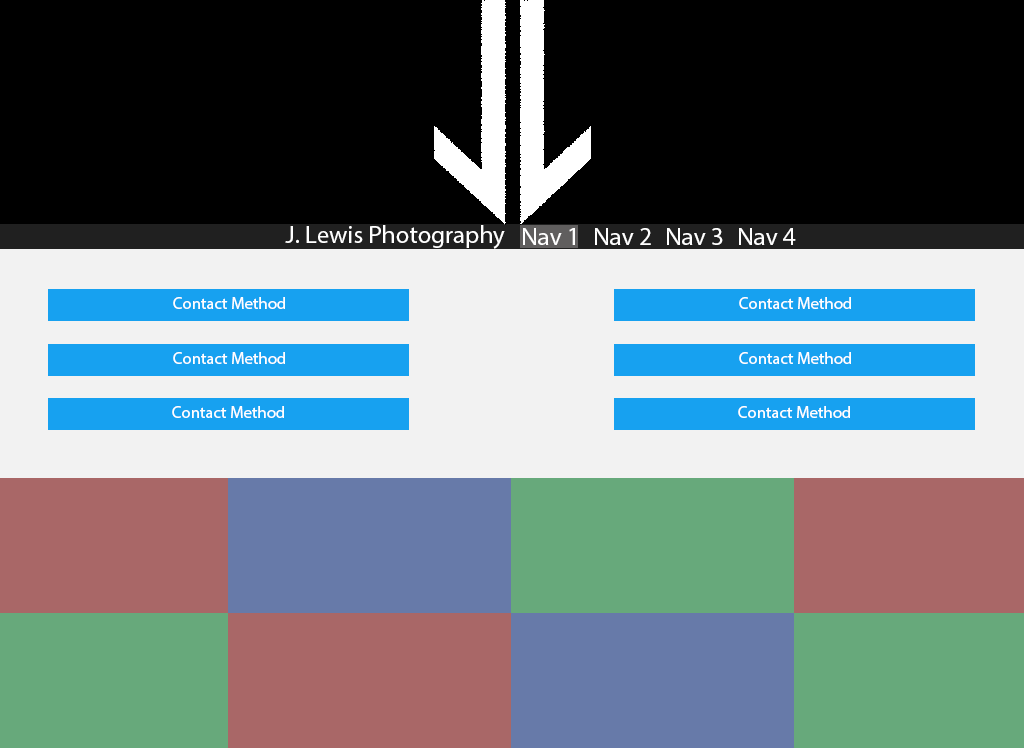
<style>
.page{position:relative;width:1024px;height:748px;background:#000000}
.page>*{position:absolute;margin:0}
.t1{font:25px "MyriadPro-Regular";color:#ffffff}
.t2{font:16.7px "MyriadPro-Regular";color:#ffffff}
</style>
<div class="page">
<p class="t1" style="left:285px;top:225px;width:220px;height:24px">J. Lewis Photography</p>
<p class="t1" style="left:523px;top:228px;width:273px;height:17px">Nav 1 Nav 2 Nav 3 Nav 4</p>
<p class="t2" style="left:173px;top:297px;width:112px;height:12px">Contact Method</p>
<p class="t2" style="left:739px;top:297px;width:112px;height:12px">Contact Method</p>
<p class="t2" style="left:173px;top:352px;width:112px;height:12px">Contact Method</p>
<p class="t2" style="left:739px;top:352px;width:112px;height:12px">Contact Method</p>
<p class="t2" style="left:172px;top:406px;width:112px;height:12px">Contact Method</p>
<p class="t2" style="left:738px;top:406px;width:112px;height:12px">Contact Method</p>
</div>
